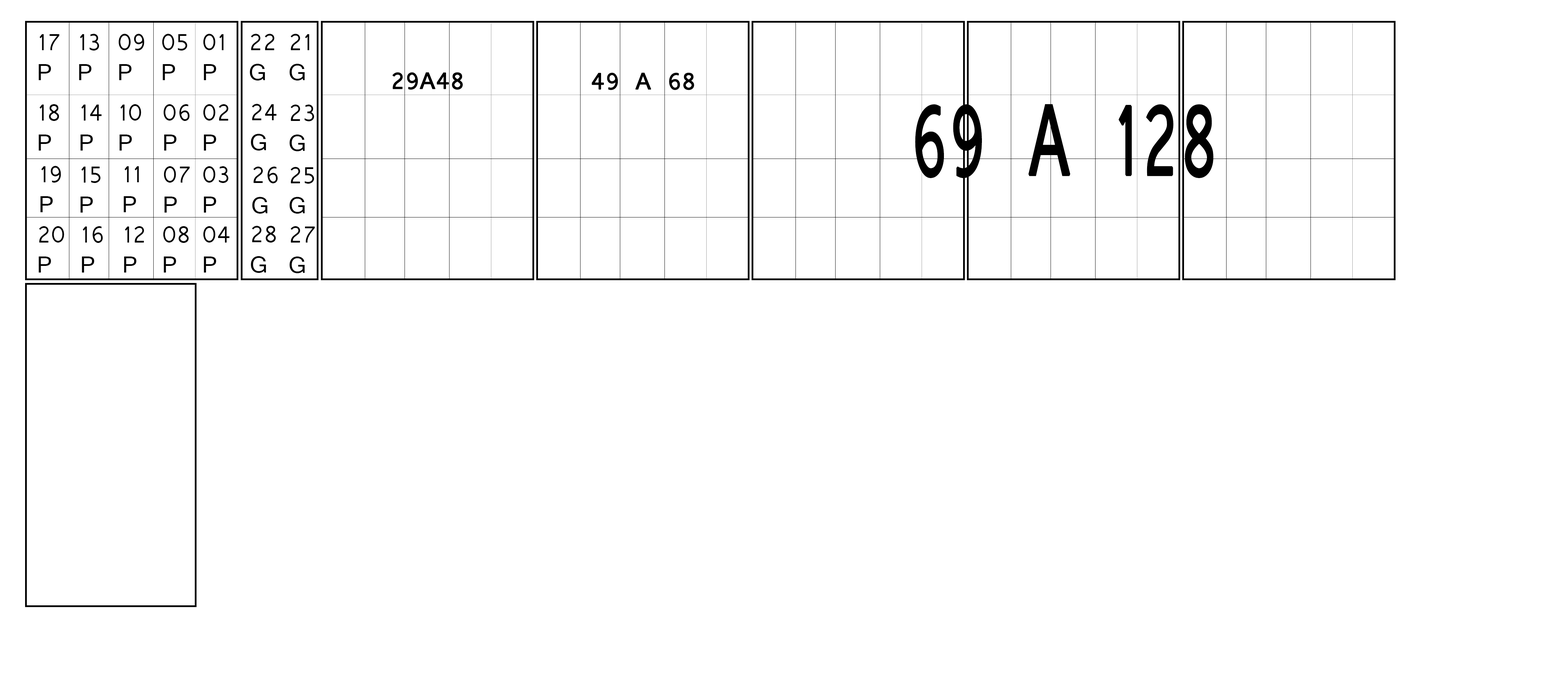
<style>
.page{position:relative;width:1568px;height:697px;background:#ffffff}
.page>*{position:absolute;margin:0}
.t1{font:25.1px "Vrinda";color:#000000}
.t2{font:25.1px "Vrinda";color:#000000;font-weight:bold}
.t3{font:107.4px "Vrinda";color:#000000;font-weight:bold;scale:0.62 1}
</style>
<div class="page">
<p class="t1" style="left:39px;top:34px;width:21px;height:46px">17<br>P</p>
<p class="t1" style="left:79px;top:34px;width:20px;height:46px">13<br>P</p>
<p class="t1" style="left:118px;top:34px;width:26px;height:46px">09 <br>P</p>
<p class="t1" style="left:162px;top:34px;width:25px;height:46px">05<br>P</p>
<p class="t1" style="left:203px;top:34px;width:21px;height:46px">01<br>P</p>
<p class="t1" style="left:250px;top:34px;width:25px;height:46px">22<br>G</p>
<p class="t1" style="left:290px;top:34px;width:19px;height:46px">21<br>G</p>
<p class="t2" style="left:392px;top:72px;width:71px;height:18px">29A48</p>
<p class="t2" style="left:592px;top:72px;width:102px;height:18px">49 A 68</p>
<p class="t1" style="left:39px;top:104px;width:20px;height:47px">18<br>P</p>
<p class="t1" style="left:80px;top:105px;width:22px;height:46px">14<br>P</p>
<p class="t1" style="left:120px;top:104px;width:21px;height:47px">10<br>P</p>
<p class="t1" style="left:163px;top:104px;width:27px;height:47px">06<br>P</p>
<p class="t1" style="left:203px;top:104px;width:26px;height:47px">02<br>P</p>
<p class="t1" style="left:251px;top:104px;width:26px;height:47px">24<br>G</p>
<p class="t1" style="left:290px;top:105px;width:24px;height:46px">23<br>G</p>
<p class="t3" style="left:915px;top:104px;width:299px;height:74px">69 A 128</p>
<p class="t1" style="left:40px;top:166px;width:21px;height:46px">19<br>P</p>
<p class="t1" style="left:80px;top:167px;width:21px;height:46px">15<br>P</p>
<p class="t1" style="left:124px;top:166px;width:15px;height:46px">11<br>P</p>
<p class="t1" style="left:164px;top:166px;width:26px;height:47px">07<br>P</p>
<p class="t1" style="left:203px;top:166px;width:26px;height:47px">03<br>P</p>
<p class="t1" style="left:252px;top:167px;width:26px;height:47px">26<br>G</p>
<p class="t1" style="left:290px;top:167px;width:24px;height:47px">25<br>G</p>
<p class="t1" style="left:39px;top:226px;width:25px;height:46px">20<br>P</p>
<p class="t1" style="left:82px;top:226px;width:21px;height:46px">16<br>P</p>
<p class="t1" style="left:124px;top:226px;width:20px;height:46px">12<br>P</p>
<p class="t1" style="left:163px;top:226px;width:26px;height:46px">08<br>P</p>
<p class="t1" style="left:203px;top:226px;width:27px;height:46px">04<br>P</p>
<p class="t1" style="left:251px;top:226px;width:25px;height:47px">28<br>G</p>
<p class="t1" style="left:290px;top:226px;width:25px;height:47px">27<br>G</p>
</div>
